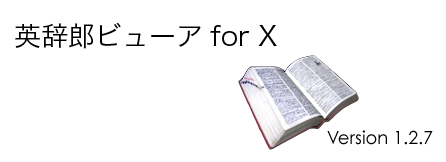
<style>
.page{position:relative;width:446px;height:162px;background:#ffffff}
.page>*{position:absolute;margin:0}
.t1{font:27px "HiraKakuPro-W3";color:#000000}
.t2{font:18px "CenturyGothic";color:#000000}
</style>
<div class="page">
<p class="t1" style="left:15px;top:22px;width:262px;height:27px">英辞郎ビューアfor X</p>
<p class="t2" style="left:327px;top:130px;width:106px;height:15px">Version 1.2.7</p>
</div>
